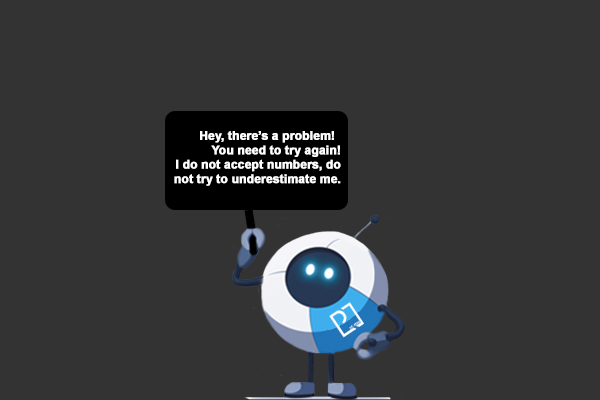
<style>
.page{position:relative;width:600px;height:400px;background:#333333}
.page>*{position:absolute;margin:0}
.t1{font:12px "Arial-BoldMT";letter-spacing:-0.01em;color:#ffffff;font-weight:bold}
</style>
<div class="page">
<p class="t1" style="left:174px;top:131px;width:167px;height:55px;text-align:right">Hey, there’s a problem!<br>You need to try again!<br>I do not accept numbers, do not try to underestimate me.</p>
</div>
